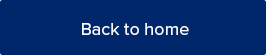
<style>
.page{position:relative;width:266px;height:55px;background:#00266b}
.page>*{position:absolute;margin:0}
.t1{font:18px "ProximaNova-Regular";color:#fbfbfb}
</style>
<div class="page">
<p class="t1" style="left:82px;top:23px;width:107px;height:12px">Back to home</p>
</div>
